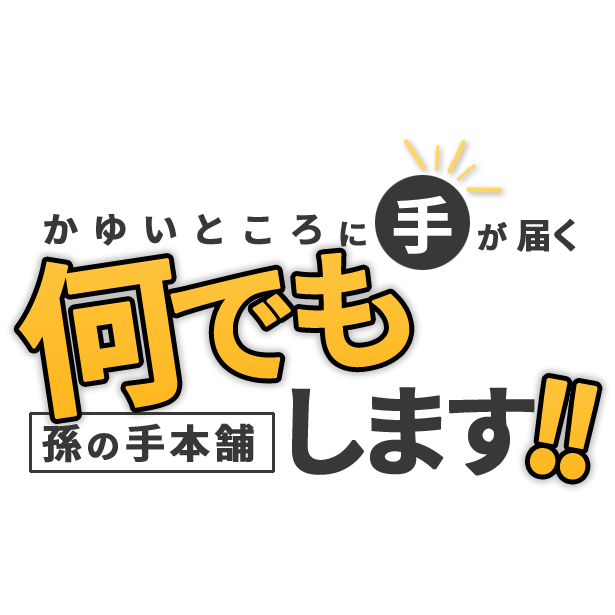
<style>
.page{position:relative;width:615px;height:615px;background:#ffffff}
.page>*{position:absolute;margin:0}
.t1{font:61.4px "SourceHanSansJP-Bold";letter-spacing:0.1em;color:#ffffff;font-weight:bold}
.t2{font:35.2px "SourceHanSansJP-Bold";letter-spacing:0.48em;color:#383838;font-weight:bold}
.t3{font:30px "SourceHanSansJP-Bold";letter-spacing:0.1em;color:#383838;font-weight:bold}
.t4{font:35.1px "SourceHanSansJP-Bold";letter-spacing:0.1em;color:#383838;font-weight:bold}
.t5{font:132.4px "SourceHanSansJP-Bold";letter-spacing:0.1em;color:#febf31;font-weight:bold}
.t6{font:165.5px "SourceHanSansJP-Bold";letter-spacing:0.1em;color:#febf31;font-weight:bold}
.t7{font:98.5px "SourceHanSansJP-Bold";letter-spacing:0.1em;color:#383838;font-weight:bold}
.t8{font:120px "SourceHanSansJP-Bold";letter-spacing:0.1em;color:#febe2e;font-weight:bold}
.t9{font:40.1px "SourceHanSansJP-Bold";letter-spacing:0.1em;color:#383838;font-weight:bold}
.t10{font:33.4px "SourceHanSansJP-Bold";letter-spacing:0.1em;color:#383838;font-weight:bold}
</style>
<div class="page">
<p class="t1" style="left:393px;top:196px;width:59px;height:58px">手</p>
<p class="t2" style="left:44px;top:214px;width:277px;height:32px">かゆいところ</p>
<p class="t3" style="left:340px;top:221px;width:26px;height:26px">に</p>
<p class="t3" style="left:478px;top:222px;width:29px;height:29px">が</p>
<p class="t4" style="left:517px;top:219px;width:59px;height:33px">届く</p>
<p class="t5" style="left:18px;top:252px;width:392px;height:167px;rotate:-9deg"><span class="t6">何</span>でも</p>
<p class="t7" style="left:291px;top:387px;width:244px;height:89px">します</p>
<p class="t8" style="left:530px;top:378px;width:68px;height:102px;rotate:10deg">!!</p>
<p class="t9" style="left:42px;top:423px;width:212px;height:40px">孫<span class="t10">の</span>手本舗</p>
</div>
